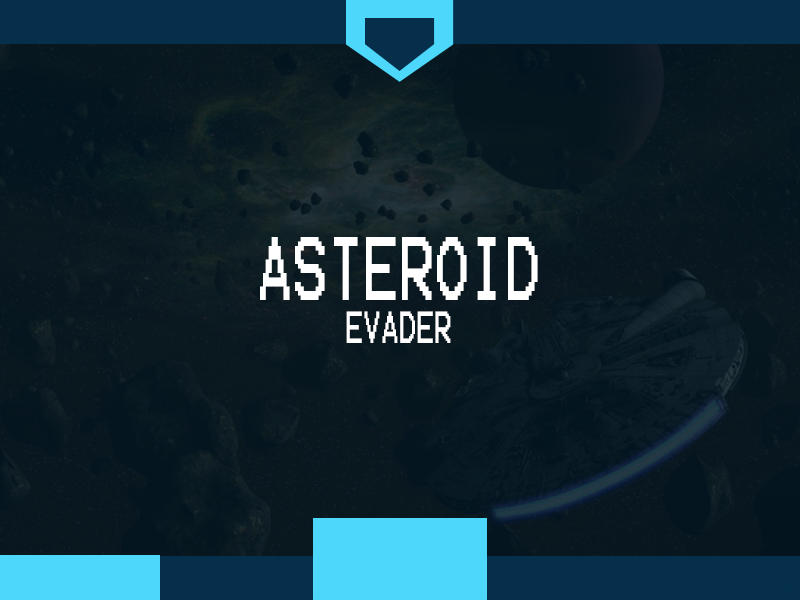
<style>
.page{position:relative;width:800px;height:600px}
.page>*{position:absolute;margin:0}
.t1{font:72px "Terminal";color:#ffffff;scale:0.66 1}
.t2{font:36px "Terminal";color:#ffffff;scale:0.66 1}
</style>
<div class="page">
<p class="t1" style="left:260px;top:237px;width:278px;height:106px;text-align:center">ASTEROID <br><span class="t2">EVADER</span></p>
</div>
